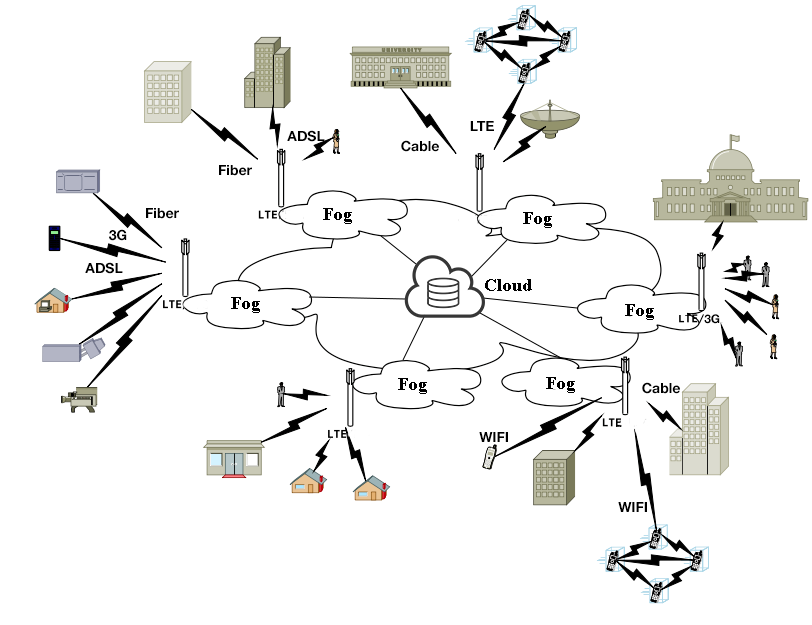
<style>
.page{position:relative;width:812px;height:625px;background:#ffffff}
.page>*{position:absolute;margin:0}
.t1{font:14px "HelveticaNeue-Bold";color:#000000}
.t2{font:18px "TimesNewRomanPS-BoldMT";color:#000000}
.t3{font:12px "HelveticaNeue-Bold";color:#000000}
</style>
<div class="page">
<p class="t1" style="left:470px;top:121px;width:24px;height:10px">LTE</p>
<p class="t1" style="left:287px;top:130px;width:38px;height:12px">ADSL</p>
<p class="t1" style="left:401px;top:140px;width:38px;height:12px">Cable</p>
<p class="t1" style="left:219px;top:165px;width:33px;height:11px">Fiber</p>
<p class="t1" style="left:146px;top:208px;width:33px;height:11px">Fiber</p>
<p class="t2" style="left:323px;top:208px;width:29px;height:16px">Fog</p>
<p class="t2" style="left:523px;top:212px;width:29px;height:16px">Fog</p>
<p class="t1" style="left:109px;top:229px;width:18px;height:12px">3G</p>
<p class="t1" style="left:85px;top:262px;width:38px;height:12px">ADSL</p>
<p class="t2" style="left:485px;top:279px;width:47px;height:12px">Cloud</p>
<p class="t2" style="left:231px;top:297px;width:29px;height:16px">Fog</p>
<p class="t2" style="left:625px;top:304px;width:29px;height:16px">Fog</p>
<p class="t3" style="left:704px;top:314px;width:16px;height:10px">3G</p>
<p class="t2" style="left:546px;top:377px;width:29px;height:16px">Fog</p>
<p class="t2" style="left:398px;top:378px;width:29px;height:16px">Fog</p>
<p class="t1" style="left:642px;top:382px;width:38px;height:12px">Cable</p>
<p class="t1" style="left:479px;top:432px;width:29px;height:10px">WIFI</p>
<p class="t1" style="left:618px;top:502px;width:29px;height:10px">WIFI</p>
</div>
